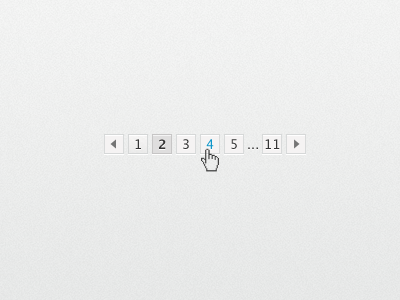
<style>
.page{position:relative;width:400px;height:300px}
.page>*{position:absolute;margin:0}
.t1{font:13px "LucidaGrande";color:#363636}
.t2{font:13px "LucidaGrande-Bold";color:#363636}
.t3{font:13px "LucidaGrande";color:#0f96c9}
</style>
<div class="page">
<p class="t1" style="left:135px;top:139px;width:6px;height:10px">1</p>
<p class="t2" style="left:159px;top:139px;width:7px;height:10px">2</p>
<p class="t1" style="left:183px;top:139px;width:6px;height:10px">3</p>
<p class="t3" style="left:206px;top:139px;width:8px;height:10px">4</p>
<p class="t1" style="left:231px;top:139px;width:6px;height:10px">5</p>
<p class="t1" style="left:248px;top:147px;width:10px;height:2px">...</p>
<p class="t1" style="left:265px;top:139px;width:15px;height:10px">11</p>
</div>
